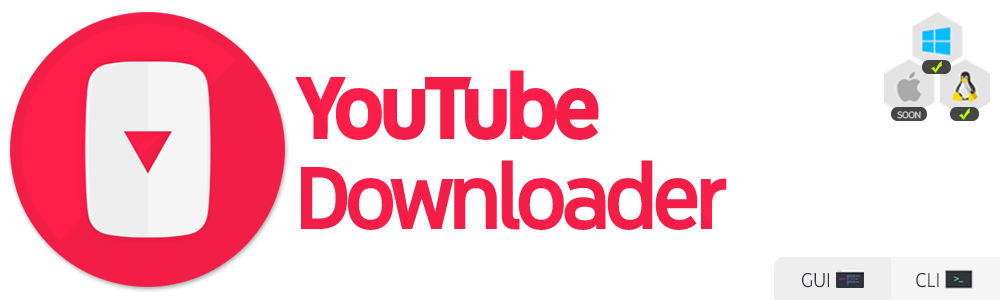
<style>
.page{position:relative;width:1000px;height:300px;background:#ffffff}
.page>*{position:absolute;margin:0}
.t1{font:100px/90px "YouTube-Sans-Medium";letter-spacing:-0.06em;color:#ff1d49}
.t2{font:100px/90px "YouTube-Sans-Bold";letter-spacing:-0.06em;color:#ff1d49}
.t3{font:11px "YouTube-Sans-Medium";letter-spacing:-0.06em;color:#c6c6c6}
.t4{font:22.4px "YouTube-Sans-Light";color:#32343a}
</style>
<div class="page">
<p class="t1" style="left:295px;top:70px;width:432px;height:160px"><span class="t2">YouTube<br></span>Downloader</p>
<p class="t3" style="left:897px;top:111px;width:24px;height:8px">SOON</p>
<p class="t4" style="left:802px;top:272px;width:27px;height:16px">GUI</p>
<p class="t4" style="left:916px;top:272px;width:23px;height:16px">CLI</p>
</div>
